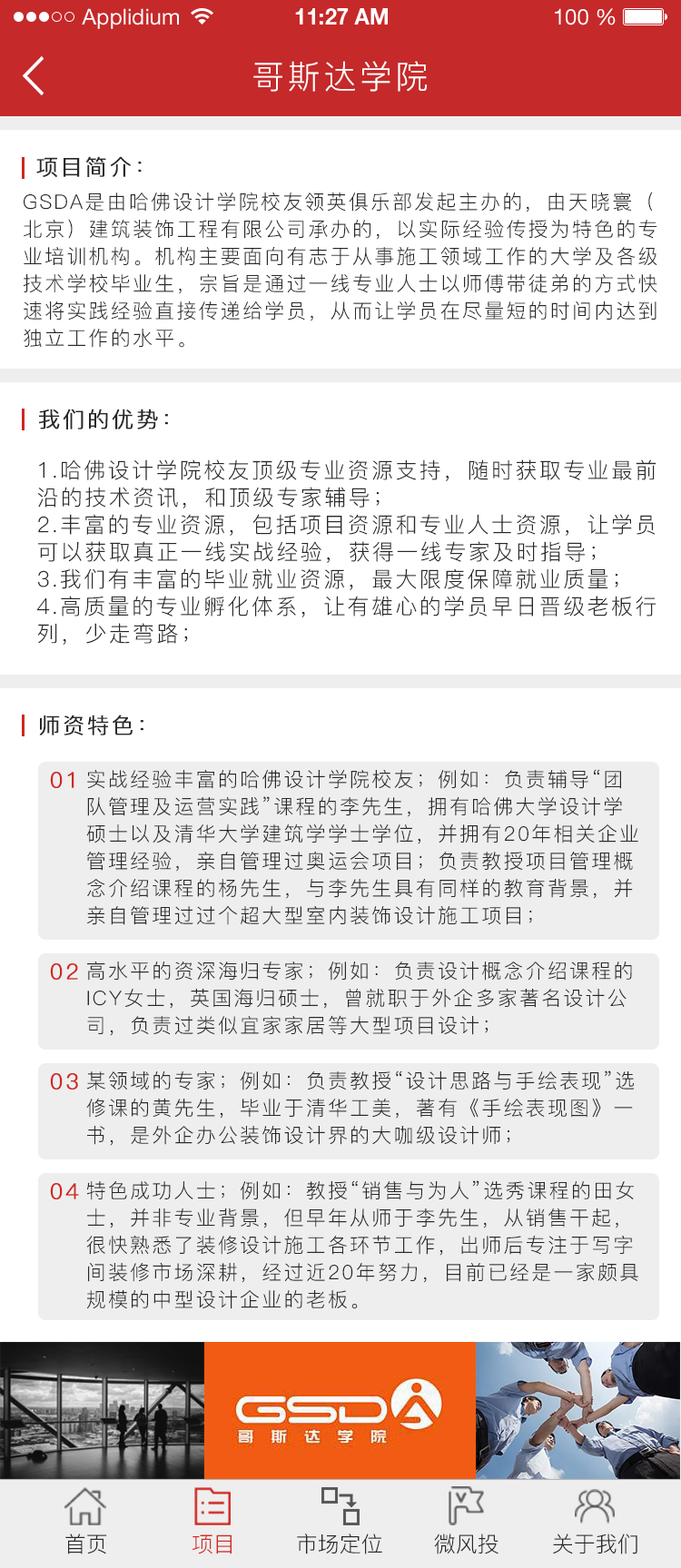
<style>
.page{position:relative;width:681px;height:1568px;background:#ffffff}
.page>*{position:absolute;margin:0}
.t1{font:21.8px "HelveticaNeueLTStd-Roman";color:#ffffff}
.t2{font:21.8px "HelveticaNeueLTStd-Bd";color:#ffffff}
.t3{font:32.7px "PingFang-SC-Regular";letter-spacing:0.1em;color:#ffffff;text-transform:uppercase}
.t4{font:21.8px "PingFang-SC-Regular";letter-spacing:0.1em;color:#282828;text-transform:uppercase;font-weight:bold}
.t5{font:20px/27.2px "PingFang-SC-Regular";letter-spacing:0.1em;color:#282828;text-transform:uppercase}
.t6{font:21.8px/27.2px "PingFang-SC-Regular";letter-spacing:0.1em;color:#282828;text-transform:uppercase}
.t7{font:21.8px "PingFang-SC-Regular";letter-spacing:0.1em;color:#cf2823;text-transform:uppercase;font-weight:bold}
.t8{font:21.8px "PingFang-SC-Regular";color:#282828}
.t9{font:21.8px "PingFang-SC-Regular";color:#cf2823}
</style>
<div class="page">
<p class="t1" style="left:82px;top:8px;width:97px;height:21px">Applidium</p>
<p class="t2" style="left:295px;top:8px;width:93px;height:17px">11:27 AM</p>
<p class="t1" style="left:555px;top:8px;width:61px;height:17px">100 %</p>
<p class="t3" style="left:253px;top:61px;width:174px;height:31px">哥斯达学院</p>
<p class="t4" style="left:36px;top:156px;width:106px;height:21px">项目简介：</p>
<p class="t5" style="left:23px;top:192px;width:634px;height:156px">GSDA是由哈佛设计学院校友领英俱乐部发起主办的，由天晓寰（北京）建筑装饰工程有限公司承办的，以实际经验传授为特色的专业培训机构。机构主要面向有志于从事施工领域工作的大学及各级技术学校毕业生，宗旨是通过一线专业人士以师傅带徒弟的方式快速将实践经验直接传递给学员，从而让学员在尽量短的时间内达到独立工作的水平。</p>
<p class="t4" style="left:39px;top:409px;width:129px;height:20px">我们的优势：</p>
<p class="t6" style="left:37px;top:459px;width:619px;height:186px">1.哈佛设计学院校友顶级专业资源支持，随时获取专业最前沿的技术资讯，和顶级专家辅导；<br>2.丰富的专业资源，包括项目资源和专业人士资源，让学员可以获取真正一线实战经验，获得一线专家及时指导；<br>3.我们有丰富的毕业就业资源，最大限度保障就业质量；<br>4.高质量的专业孵化体系，让有雄心的学员早日晋级老板行列，少走弯路；</p>
<p class="t4" style="left:39px;top:715px;width:104px;height:20px">师资特色：</p>
<p class="t7" style="left:50px;top:772px;width:24px;height:16px">01</p>
<p class="t5" style="left:86px;top:769px;width:552px;height:156px">实战经验丰富的哈佛设计学院校友；例如：负责辅导“团队管理及运营实践”课程的李先生，拥有哈佛大学设计学硕士以及清华大学建筑学学士学位，并拥有20年相关企业管理经验，亲自管理过奥运会项目；负责教授项目管理概念介绍课程的杨先生，与李先生具有同样的教育背景，并亲自管理过过个超大型室内装饰设计施工项目；</p>
<p class="t7" style="left:50px;top:963px;width:28px;height:17px">02</p>
<p class="t5" style="left:87px;top:962px;width:545px;height:74px">高水平的资深海归专家；例如：负责设计概念介绍课程的ICY女士，英国海归硕士，曾就职于外企多家著名设计公司，负责过类似宜家家居等大型项目设计；</p>
<p class="t7" style="left:50px;top:1073px;width:28px;height:17px">03</p>
<p class="t5" style="left:86px;top:1070px;width:549px;height:76px">某领域的专家；例如：负责教授“设计思路与手绘表现”选修课的黄先生，毕业于清华工美，著有《手绘表现图》一书，是外企办公装饰设计界的大咖级设计师；</p>
<p class="t5" style="left:86px;top:1180px;width:552px;height:129px">特色成功人士；例如：教授“销售与为人”选秀课程的田女士，并非专业背景，但早年从师于李先生，从销售干起，很快熟悉了装修设计施工各环节工作，出师后专注于写字间装修市场深耕，经过近20年努力，目前已经是一家颇具规模的中型设计企业的老板。</p>
<p class="t7" style="left:50px;top:1183px;width:29px;height:16px">04</p>
<p class="t8" style="left:65px;top:1533px;width:42px;height:21px">首页</p>
<p class="t9" style="left:192px;top:1534px;width:40px;height:20px">项目</p>
<p class="t8" style="left:297px;top:1533px;width:85px;height:21px">市场定位</p>
<p class="t8" style="left:434px;top:1533px;width:64px;height:21px">微风投</p>
<p class="t8" style="left:553px;top:1533px;width:84px;height:21px">关于我们</p>
</div>
